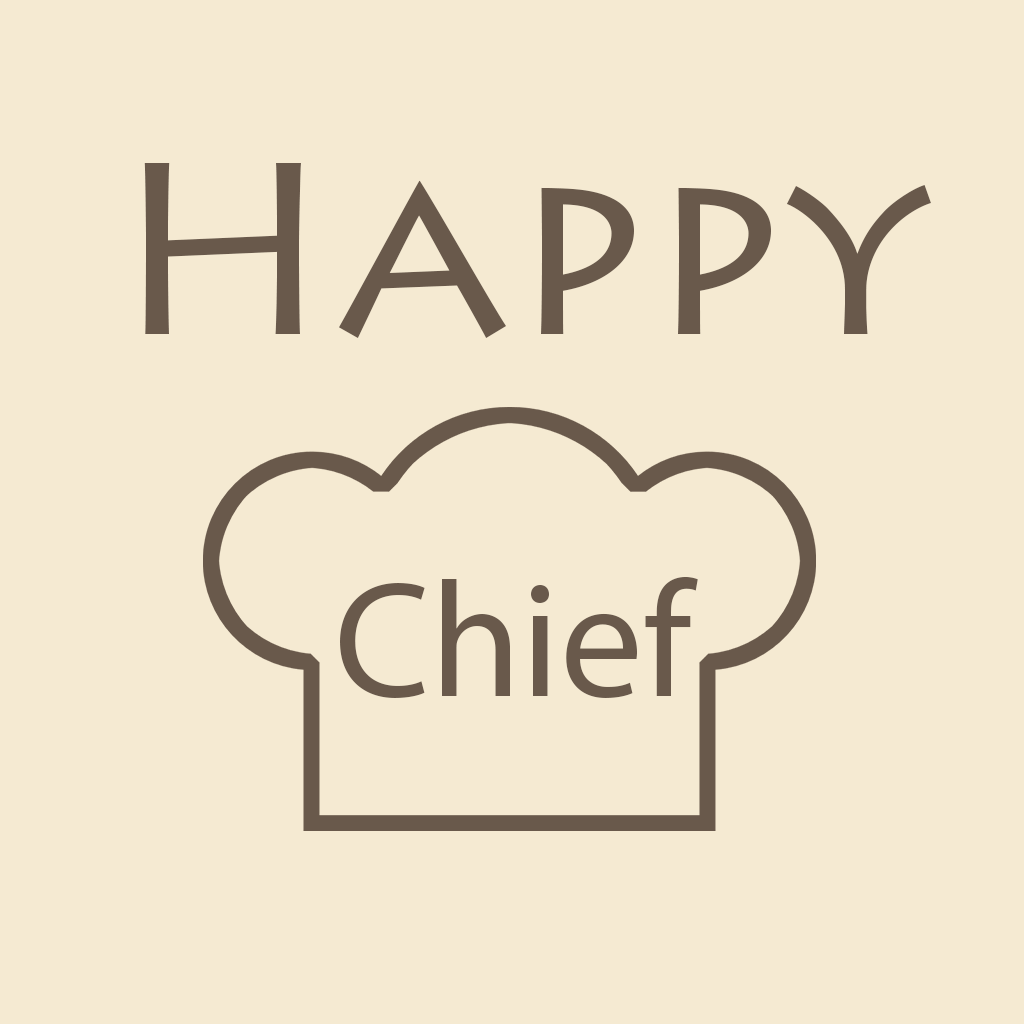
<style>
.page{position:relative;width:1024px;height:1024px;background:#f5ead2}
.page>*{position:absolute;margin:0}
.t1{font:245px "LithosPro-Regular";color:#69594b}
.t2{font:165px "MyriadPro-Regular";color:#69594b}
</style>
<div class="page">
<p class="t1" style="left:144px;top:163px;width:787px;height:175px">Happy</p>
<p class="t2" style="left:340px;top:577px;width:358px;height:121px">Chief</p>
</div>
